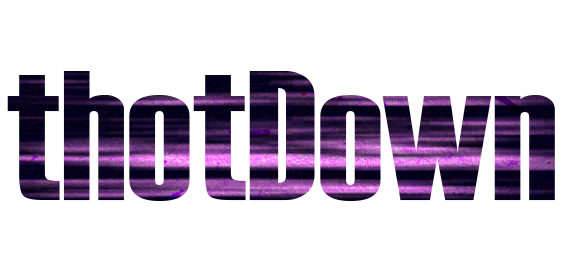
<style>
.page{position:relative;width:563px;height:271px;background:#ffffff}
.page>*{position:absolute;margin:0}
.t1{font:183.8px "Haettenschweiler"}
</style>
<div class="page">
<p class="t1" style="left:7px;top:71px;width:548px;height:130px">thotDown</p>
</div>
